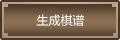
<style>
.page{position:relative;width:120px;height:40px}
.page>*{position:absolute;margin:0}
.t1{font:12px "MicrosoftYaHei";color:#ffffff}
</style>
<div class="page">
<p class="t1" style="left:36px;top:14px;width:49px;height:13px">生成棋谱</p>
</div>
